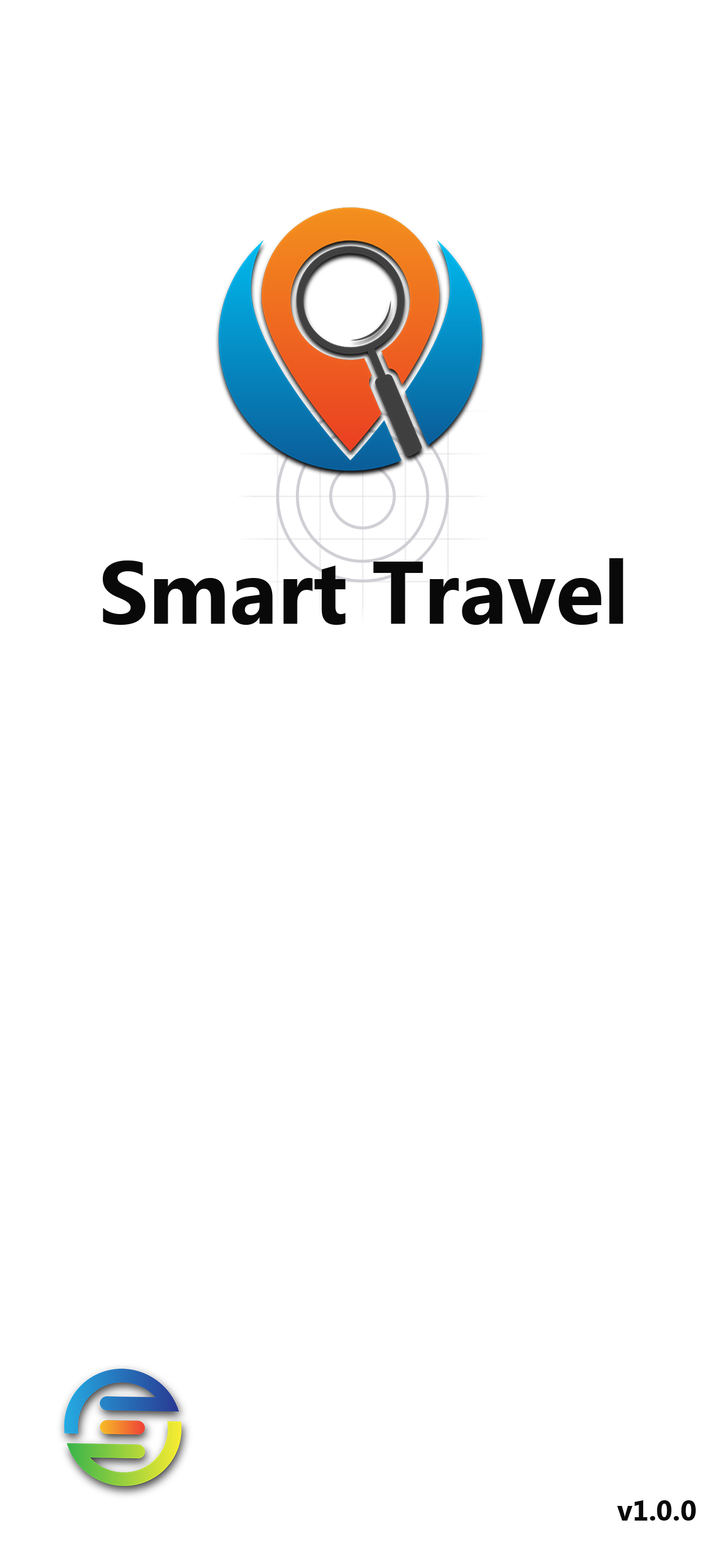
<style>
.page{position:relative;width:725px;height:1568px;background:#ffffff}
.page>*{position:absolute;margin:0}
.t1{font:88.9px "MicrosoftTaiLe-Bold";color:#080908}
.t2{font:28.2px "MicrosoftTaiLe-Bold";color:#080908}
</style>
<div class="page">
<p class="t1" style="left:103px;top:558px;width:520px;height:67px">Smart Travel</p>
<p class="t2" style="left:617px;top:1500px;width:79px;height:21px">v1.0.0</p>
</div>
